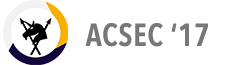
<style>
.page{position:relative;width:235px;height:65px;background:#ffffff}
.page>*{position:absolute;margin:0}
.t1{font:31px "AvenirNextCondensed-DemiBold";color:#777777;font-weight:bold}
</style>
<div class="page">
<p class="t1" style="left:85px;top:23px;width:123px;height:24px">ACSEC ‘17</p>
</div>
